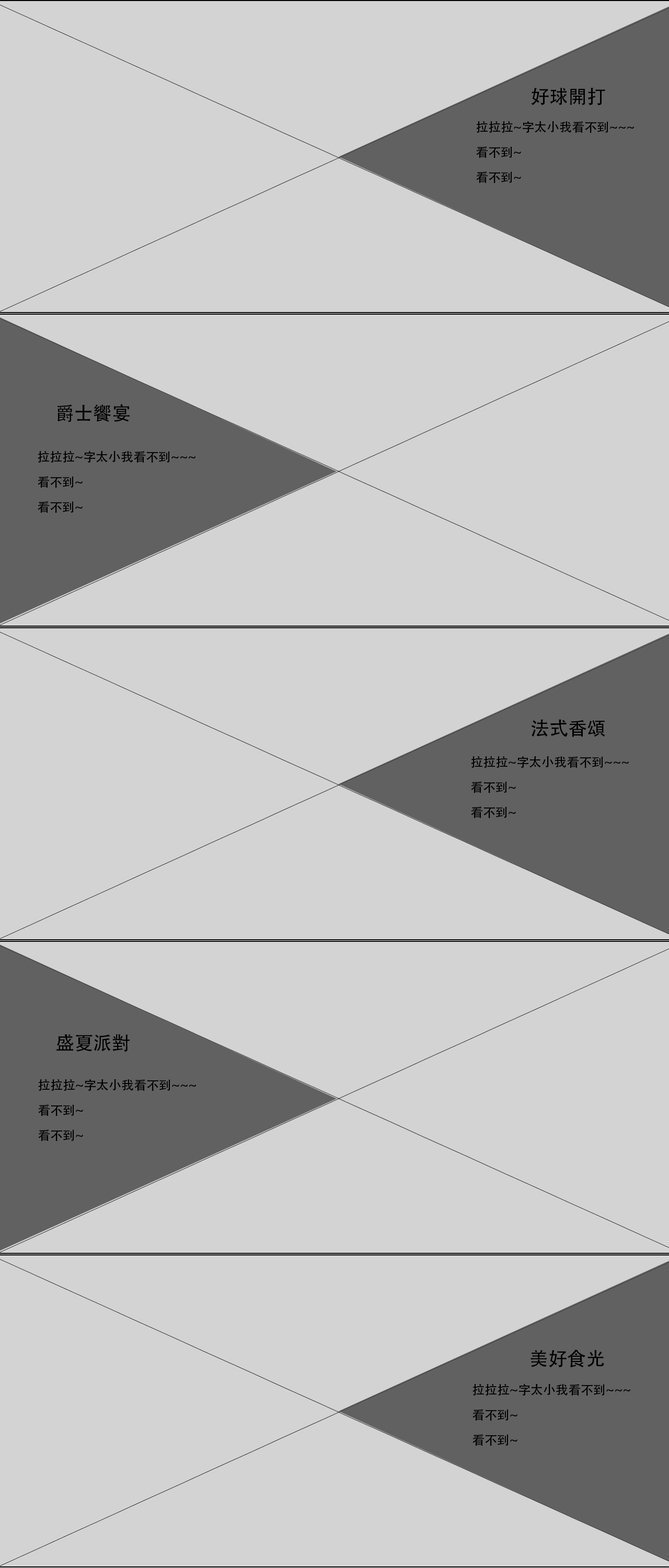
<style>
.page{position:relative;width:669px;height:1568px;background:#d3d3d3}
.page>*{position:absolute;margin:0}
.t1{font:18.8px "AdobeHeitiStd-Regular";color:#000000}
.t2{font:12.5px/25.1px "AdobeHeitiStd-Regular";color:#000000}
</style>
<div class="page">
<p class="t1" style="left:531px;top:87px;width:74px;height:18px">好球開打</p>
<p class="t2" style="left:476px;top:121px;width:158px;height:62px">拉拉拉~字太小我看不到~~~<br>看不到~<br>看不到~</p>
<p class="t1" style="left:57px;top:404px;width:73px;height:18px">爵士饗宴</p>
<p class="t2" style="left:38px;top:451px;width:157px;height:62px">拉拉拉~字太小我看不到~~~<br>看不到~<br>看不到~</p>
<p class="t1" style="left:532px;top:719px;width:73px;height:18px">法式香頌</p>
<p class="t2" style="left:471px;top:756px;width:158px;height:62px">拉拉拉~字太小我看不到~~~<br>看不到~<br>看不到~</p>
<p class="t1" style="left:56px;top:1034px;width:74px;height:18px">盛夏派對</p>
<p class="t2" style="left:38px;top:1079px;width:158px;height:62px">拉拉拉~字太小我看不到~~~<br>看不到~<br>看不到~</p>
<p class="t1" style="left:531px;top:1350px;width:73px;height:18px">美好食光</p>
<p class="t2" style="left:472px;top:1383px;width:158px;height:63px">拉拉拉~字太小我看不到~~~<br>看不到~<br>看不到~</p>
</div>
